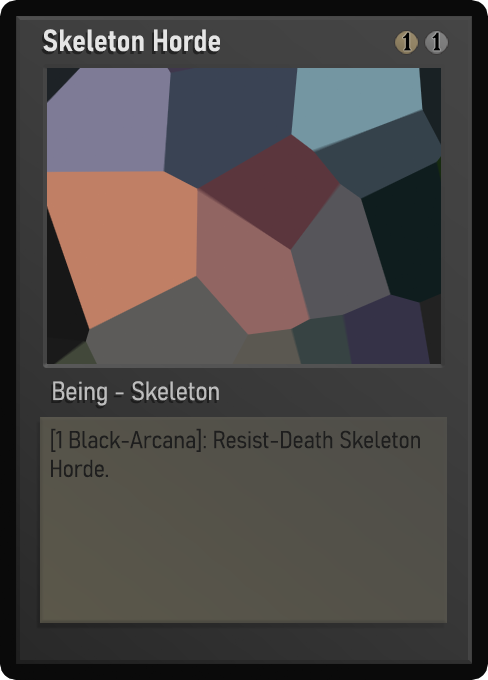
<style>
.page{position:relative;width:488px;height:680px}
.page>*{position:absolute;margin:0}
.t1{font:30px "Bahnschrift-SemiBoldSemiCondensed";color:#f2f2f2;font-weight:bold}
.t2{font:25px "WTRRoycroft";color:#000000;font-weight:bold;scale:1.09 1}
.t3{font:26px "Bahnschrift-LightSemiCondensed";color:#c8c8c8;font-weight:bold}
.t4{font:24px "Bahnschrift-LightSemiCondensed";color:#1e1e1e;font-weight:bold}
</style>
<div class="page">
<p class="t1" style="left:43px;top:29px;width:177px;height:23px;opacity:0.9">Skeleton Horde</p>
<p class="t2" style="left:403px;top:32px;width:8px;height:19px">1</p>
<p class="t2" style="left:432px;top:32px;width:9px;height:19px">1</p>
<p class="t3" style="left:53px;top:381px;width:166px;height:25px;opacity:0.9">Being - Skeleton</p>
<p class="t4" style="left:51px;top:428px;width:369px;height:50px">[1 Black-Arcana]: Resist-Death Skeleton Horde.</p>
</div>
